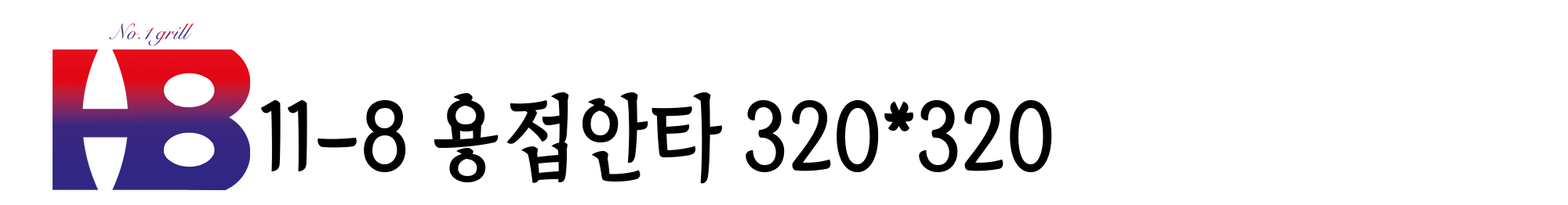
<style>
.page{position:relative;width:1568px;height:205px;background:#ffffff}
.page>*{position:absolute;margin:0}
.t1{font:93.7px "TheIndependenceHallofKorea-Regular";color:#000000;scale:0.89 1}
</style>
<div class="page">
<p class="t1" style="left:261px;top:93px;width:791px;height:91px">11-8 용접안타 320*320</p>
</div>
